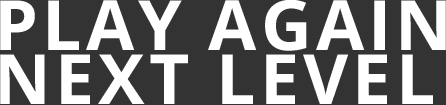
<style>
.page{position:relative;width:446px;height:105px;background:#333333}
.page>*{position:absolute;margin:0}
.t1{font:69.6px "OpenSans-Bold";letter-spacing:0.06em;color:#ffffff}
</style>
<div class="page">
<p class="t1" style="left:0px;top:0px;width:446px;height:51px">PLAY AGAIN</p>
<p class="t1" style="left:0px;top:54px;width:433px;height:50px">NEXT LEVEL</p>
</div>
